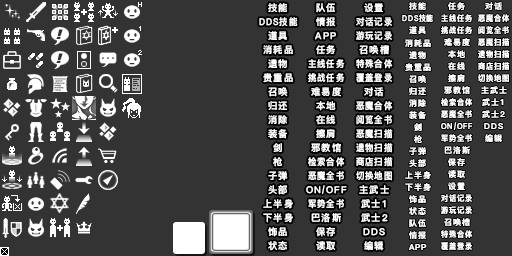
<style>
.page{position:relative;width:512px;height:256px;background:#333333}
.page>*{position:absolute;margin:0}
.t1{font:9.3px/14px "DFKingGothicSC14-Semibold";letter-spacing:0.125em;color:#fefefe}
.t2{font:9.3px/14px "DFKingGothicSC14-Semibold";letter-spacing:0.125em;color:#fefefe;scale:0.9 1}
.t3{font:8px/12px "DFKingGothicSC14-Semibold";letter-spacing:0.125em;color:#fefefe}
.t4{font:8px/12.7px "DFKingGothicSC14-Semibold";letter-spacing:0.125em;color:#fefefe;scale:0.85 1}
.t5{font:8px/12.7px "DFKingGothicSC14-Semibold";letter-spacing:0.125em;color:#fefefe}
.t6{font:8px/12px "DFKingGothicSC14-Semibold";letter-spacing:0.125em;color:#fefefe;scale:0.9 1}
</style>
<div class="page">
<p class="t1" style="left:259px;top:3px;width:39px;height:248px;text-align:center">技能<br><span class="t2">DDS技能<br></span>道具<br>消耗品<br>遗物<br>贵重品<br>召唤<br>归还<br>消除<br>装备<br>剑<br>枪<br>子弹<br>头部<br>上半身<br>下半身<br>饰品<br>状态</p>
<p class="t1" style="left:306px;top:3px;width:41px;height:248px;text-align:center">队伍<br>情报<br>APP<br>任务<br><span class="t2">主线任务<br>挑战任务<br></span>难易度<br>本地<br>在线<br>擦肩<br>邪教馆<br><span class="t2">检索合体<br>恶魔全书<br></span>ON/OFF<br><span class="t2">军势全书<br></span>巴洛斯<br>保存<br>读取</p>
<p class="t2" style="left:356px;top:3px;width:37px;height:248px;text-align:center"><span class="t1">设置<br></span>对话记录<br>游玩记录<br><span class="t1">召唤槽<br></span>特殊合体<br>覆盖登录<br><span class="t1">对话<br></span>恶魔合体<br>阅览全书<br>恶魔扫描<br>遗物扫描<br>商店扫描<br>切换地图<br><span class="t1">主武士<br>武士1<br>武士2<br>DDS<br>编辑</span></p>
<p class="t3" style="left:402px;top:2px;width:31px;height:248px;text-align:center">技能<br><span class="t4">DDS技能<br></span><span class="t5">道具<br></span>消耗品<br>遗物<br>贵重品<br>召唤<br>归还<br>消除<br>装备<br>剑<br>枪<br>子弹<br>头部<br>上半身<br>下半身<br>饰品<br>状态<br>队伍<br>情报<br>APP</p>
<p class="t6" style="left:441px;top:2px;width:32px;height:248px;text-align:center"><span class="t3">任务<br></span>主线任务<br>挑战任务<br><span class="t3">难易度<br>本地<br>在线<br>擦肩<br>邪教馆<br></span>检索合体<br>恶魔全书<br>ON/OFF<br>军势全书<br><span class="t3">巴洛斯<br>保存<br>读取<br>设置<br></span>对话记录<br>游玩记录<br><span class="t3">召唤槽<br></span>特殊合体<br>覆盖登录</p>
<p class="t6" style="left:478px;top:2px;width:32px;height:140px;text-align:center"><span class="t3">对话<br></span>恶魔合体<br>阅览全书<br>恶魔扫描<br>遗物扫描<br>商店扫描<br>切换地图<br><span class="t3">主武士<br>武士1<br>武士2<br>DDS<br>编辑</span></p>
</div>
